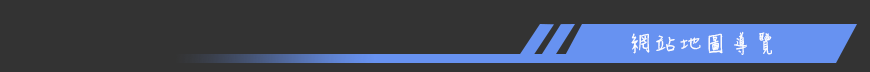
<style>
.page{position:relative;width:870px;height:72px;background:#333333}
.page>*{position:absolute;margin:0}
.t1{font:25px "DFHsiu-W3-WIN-BF";color:#ffffff}
</style>
<div class="page">
<p class="t1" style="left:631px;top:31px;width:141px;height:24px">網站地圖導覽</p>
</div>
